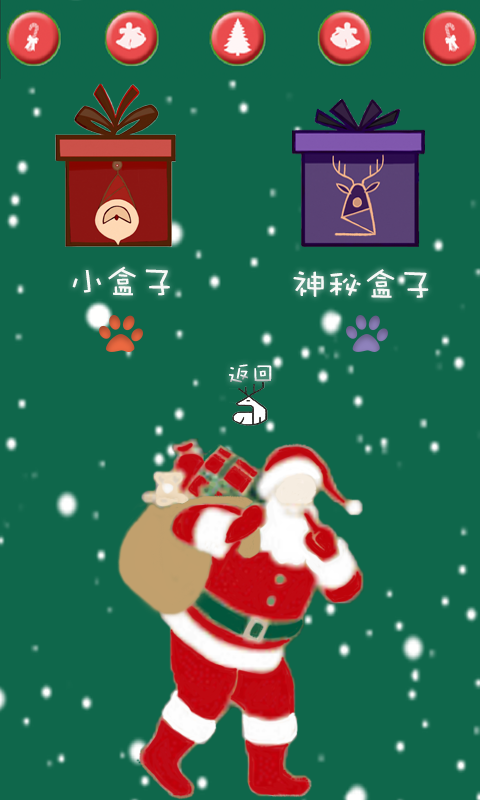
<style>
.page{position:relative;width:480px;height:800px;background:#0f674b}
.page>*{position:absolute;margin:0}
.t1{font:36px "DFWaWaSC-W5";color:#f7f9f7}
.t2{font:24px "DFWaWaSC-W5";color:#fdfeff}
</style>
<div class="page">
<p class="t1" style="left:72px;top:266px;width:98px;height:30px">小盒子</p>
<p class="t1" style="left:293px;top:269px;width:136px;height:29px">神秘盒子</p>
<p class="t2" style="left:229px;top:364px;width:43px;height:19px">返回</p>
</div>
